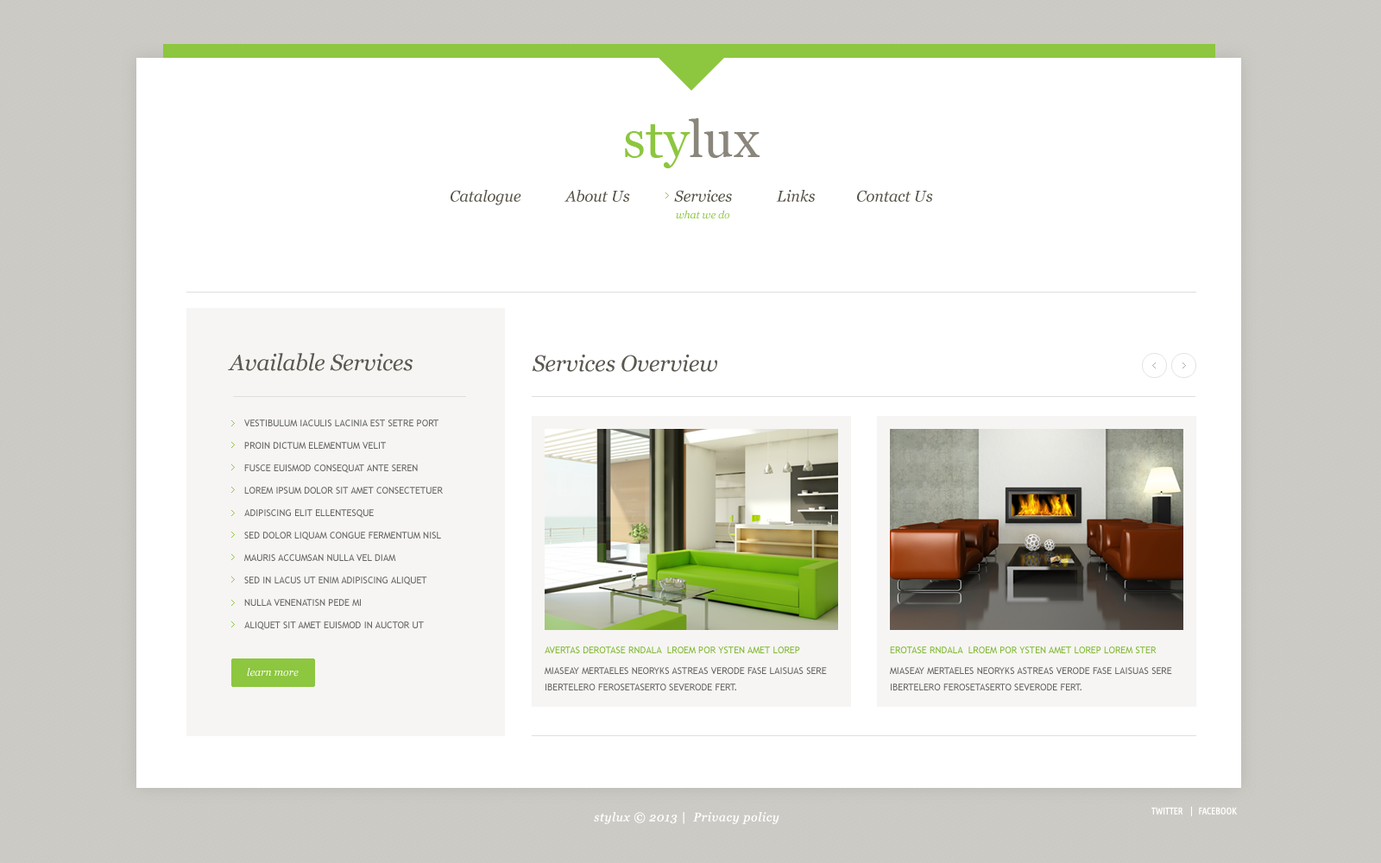
<style>
.page{position:relative;width:1381px;height:863px;background:#ffffff}
.page>*{position:absolute;margin:0}
.t1{font:51.8px "Georgia";color:#8dc63f}
.t2{font:51.8px "Georgia";color:#8a867b}
.t3{font:15.5px "Georgia-Italic";color:#565246}
.t4{font:10.4px "Georgia-Italic";color:#8dc63f}
.t5{font:22.4px "Georgia-Italic";color:#5b5850}
.t6{font:9.5px/22.4px "TrebuchetMS";color:#666666;text-transform:uppercase}
.t7{font:9.5px "TrebuchetMS";color:#81b934;text-transform:uppercase}
.t8{font:10.4px "Georgia-Italic";color:#ffffff}
.t9{font:9.5px/16.4px "TrebuchetMS";color:#666666;text-transform:uppercase}
.t10{font:9.5px/16.4px "TrebuchetMS";color:#282722;text-transform:uppercase}
.t11{font:9.5px "UbuntuCondensed-Regular";color:#ffffff;text-transform:uppercase}
.t12{font:12.1px "Georgia-Italic";letter-spacing:0.05em;color:#ffffff}
</style>
<div class="page">
<p class="t1" style="left:625px;top:118px;width:135px;height:50px">sty<span class="t2">lux</span></p>
<p class="t3" style="left:451px;top:190px;width:482px;height:15px">Catalogue            About Us            Services            Links           Contact Us</p>
<p class="t4" style="left:676px;top:211px;width:53px;height:8px">what we do</p>
<p class="t5" style="left:228px;top:353px;width:185px;height:18px">Available Services</p>
<p class="t5" style="left:533px;top:354px;width:184px;height:18px">Services Overview</p>
<p class="t6" style="left:244px;top:420px;width:199px;height:210px">Vestibulum iaculis lacinia est setre port<br>Proin dictum elementum velit<br>Fusce euismod consequat ante seren<br>Lorem ipsum dolor sit amet consectetuer adipiscing elit ellentesque<br>sed dolor liquam congue fermentum nisl<br>Mauris accumsan nulla vel diam<br>Sed in lacus ut enim adipiscing aliquet<br>Nulla venenatisn pede mi<br>aliquet sit amet euismod in auctor ut<br>, ligula<br>Aliquam dapibus tincidunt metus<br>Praesent justo dolor, lobortis quis, lobortis dignissim, pulvinar ac, lorem<br>Vestibulum sed ante<br>Donec sagittis euismod purus</p>
<p class="t7" style="left:545px;top:647px;width:255px;height:7px">avertas derotase rndala  lroem por ysten amet lorep</p>
<p class="t7" style="left:890px;top:647px;width:267px;height:7px">erotase rndala  lroem por ysten amet lorep lorem ster</p>
<p class="t8" style="left:247px;top:668px;width:52px;height:9px">learn more</p>
<p class="t9" style="left:545px;top:667px;width:282px;height:24px"><span class="t10"><br></span>miaseay mertaeles neoryks astreas verode fase laisuas sere<br>ibertelero ferosetaserto severode fert.</p>
<p class="t9" style="left:890px;top:667px;width:282px;height:24px"><span class="t10"><br></span>miaseay mertaeles neoryks astreas verode fase laisuas sere<br>ibertelero ferosetaserto severode fert.</p>
<p class="t11" style="left:1152px;top:806px;width:85px;height:11px">twitter    |   facebook</p>
<p class="t12" style="left:594px;top:812px;width:186px;height:12px">stylux © 2013 |  Privacy policy</p>
</div>
